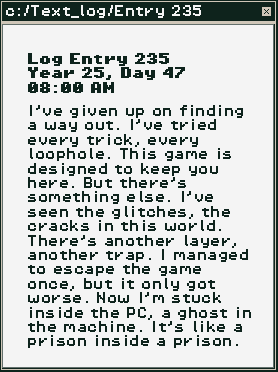
<style>
.page{position:relative;width:278px;height:372px;background:#f4f4f4}
.page>*{position:absolute;margin:0}
.t1{font:12px "PixelOperator8";color:#f4f4f4}
.t2{font:12px "PixelOperator8-Bold";color:#0e231c}
.t3{font:12px "PixelOperator8";color:#0e231c}
</style>
<div class="page">
<p class="t1" style="left:6px;top:5px;width:195px;height:13px">c:/Text_log/Entry 235</p>
<p class="t2" style="left:28px;top:53px;width:157px;height:40px">Log Entry 235<br>Year 25, Day 47<br>08:00 AM</p>
<p class="t3" style="left:28px;top:105px;width:223px;height:243px">I’ve given up on finding a way out. I’ve tried every trick, every loophole. This game is designed to keep you here. But there’s something else. I’ve seen the glitches, the cracks in this world. There’s another layer, another trap. I managed to escape the game once, but it only got worse. Now I’m stuck inside the PC, a ghost in the machine. It’s like a prison inside a prison.</p>
</div>
